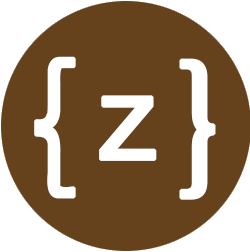
<style>
.page{position:relative;width:250px;height:252px;background:#65421c}
.page>*{position:absolute;margin:0}
.t1{font:157.5px "SimHei";color:#ffffff;font-weight:bold}
.t2{font:141.8px "SimHei";color:#ffffff;font-weight:bold}
</style>
<div class="page">
<p class="t1" style="left:34px;top:56px;width:42px;height:143px">｛</p>
<p class="t1" style="left:179px;top:58px;width:37px;height:142px">}</p>
<p class="t2" style="left:99px;top:95px;width:58px;height:66px">z</p>
</div>
